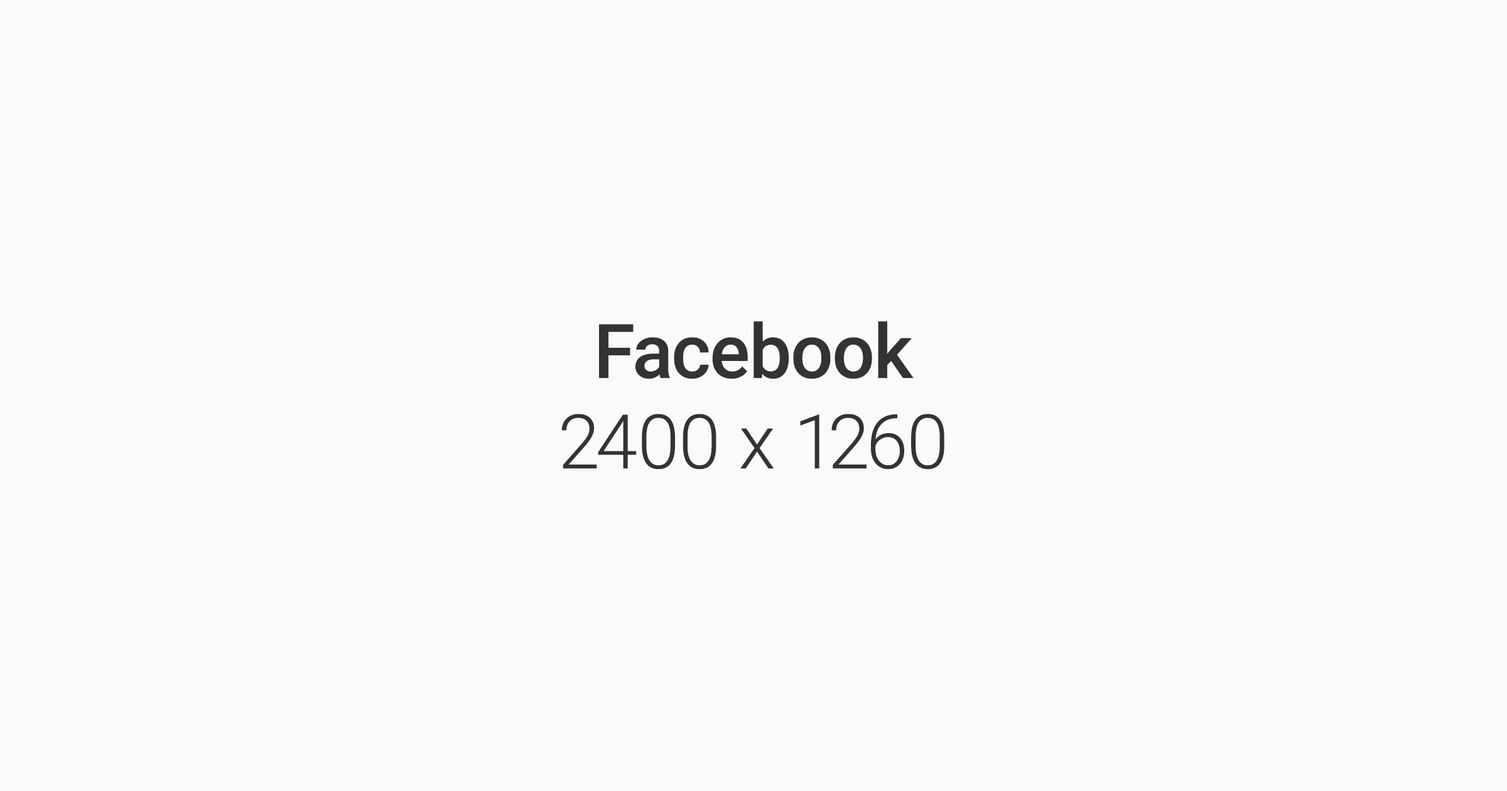
<style>
.page{position:relative;width:1507px;height:791px;background:#fafafa}
.page>*{position:absolute;margin:0}
.t1{font:75.4px "Roboto-Light";color:#333333}
.t2{font:75.4px "Roboto-Medium";color:#333333}
</style>
<div class="page">
<p class="t1" style="left:561px;top:322px;width:383px;height:148px;text-align:center"><span class="t2">Facebook<br></span>2400 x 1260</p>
</div>
